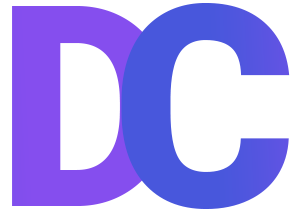
<style>
.page{position:relative;width:296px;height:211px;background:#ffffff}
.page>*{position:absolute;margin:0}
.t1{font:280.9px "Roboto-Black";color:#854eee}
.t2{font:280.9px "Roboto-Black";color:#4857dc}
</style>
<div class="page">
<p class="t1" style="left:12px;top:6px;width:158px;height:200px">D</p>
<p class="t2" style="left:121px;top:3px;width:169px;height:206px">C</p>
</div>
